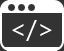
<style>
.page{position:relative;width:64px;height:51px;background:#333333}
.page>*{position:absolute;margin:0}
.t1{font:26px "Ebrima";color:#ffffff}
</style>
<div class="page">
<p class="t1" style="left:12px;top:20px;width:40px;height:21px">&lt;/&gt;</p>
</div>
